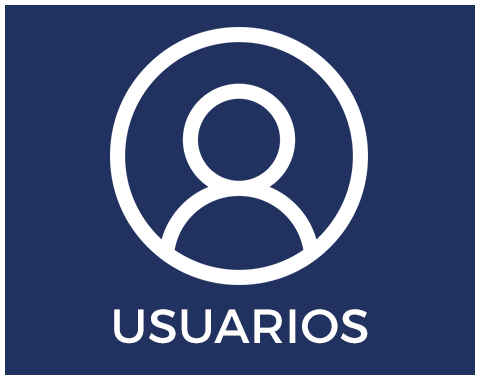
<style>
.page{position:relative;width:480px;height:380px;background:#223260}
.page>*{position:absolute;margin:0}
.t1{font:48px "Montserrat-Regular";letter-spacing:0.01em;color:#ffffff}
</style>
<div class="page">
<p class="t1" style="left:114px;top:309px;width:254px;height:35px">USUARIOS</p>
</div>
